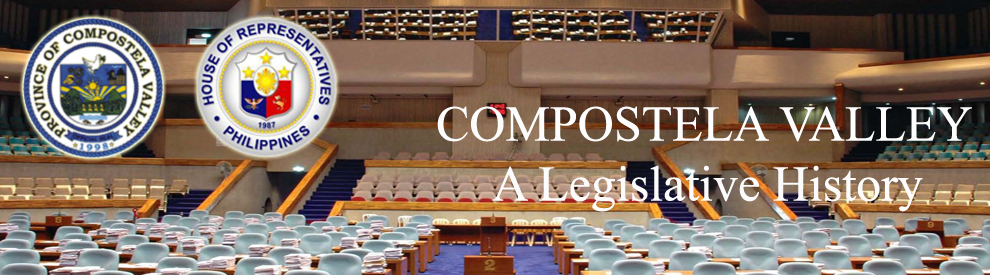
<style>
.page{position:relative;width:990px;height:275px}
.page>*{position:absolute;margin:0}
.t1{font:50px "TimesNewRomanPSMT";color:#fdfcfc}
.t2{font:50px "TimesNewRomanPSMT";color:#fdfdfd}
</style>
<div class="page">
<p class="t1" style="left:437px;top:106px;width:535px;height:106px;text-align:center"><span class="t2">COMPOSTELA VALLEY<br></span>A Legislative History</p>
</div>
